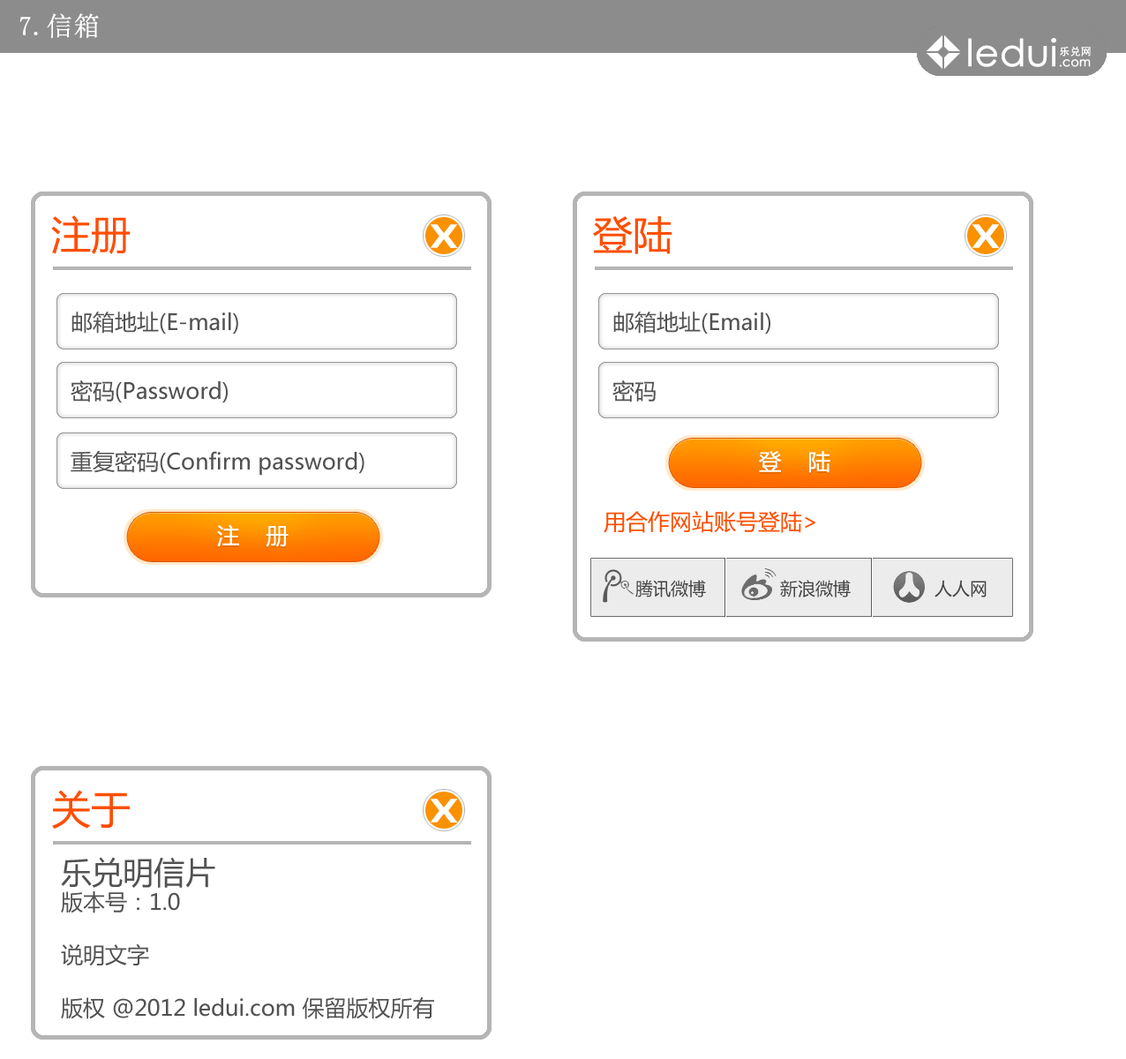
<style>
.page{position:relative;width:1126px;height:1059px;background:#ffffff}
.page>*{position:absolute;margin:0}
.t1{font:26.5px "SimSun";color:#ffffff;font-weight:bold}
.t2{font:39.7px "MicrosoftYaHei";color:#ff4e00}
.t3{font:35.3px "ç»å¸ç»¼èºä½ç®-regular";color:#ffffff}
.t4{font:22.1px "MicrosoftYaHei";color:#525252}
.t5{font:22.4px "MicrosoftYaHei";color:#ffffff}
.t6{font:22.1px "MicrosoftYaHei";color:#ff4e00}
.t7{font:17.6px "MicrosoftYaHei";color:#444444}
.t8{font:30.9px "MicrosoftYaHei";color:#525252}
</style>
<div class="page">
<p class="t1" style="left:19px;top:13px;width:80px;height:26px">7.信箱</p>
<p class="t2" style="left:51px;top:215px;width:80px;height:39px">注册</p>
<p class="t2" style="left:593px;top:216px;width:79px;height:38px">登陆</p>
<p class="t3" style="left:430px;top:224px;width:28px;height:24px">X</p>
<p class="t3" style="left:972px;top:224px;width:28px;height:24px">X</p>
<p class="t4" style="left:71px;top:312px;width:167px;height:22px">邮箱地址(E-mail)</p>
<p class="t4" style="left:613px;top:312px;width:157px;height:22px">邮箱地址(Email)</p>
<p class="t4" style="left:71px;top:380px;width:157px;height:23px">密码(Password)</p>
<p class="t4" style="left:612px;top:380px;width:44px;height:22px">密码</p>
<p class="t4" style="left:71px;top:451px;width:293px;height:25px">重复密码(Confirm password)</p>
<p class="t5" style="left:759px;top:451px;width:71px;height:22px">登    陆</p>
<p class="t6" style="left:604px;top:511px;width:211px;height:22px">用合作网站账号登陆&gt;</p>
<p class="t5" style="left:217px;top:524px;width:72px;height:23px">注    册</p>
<p class="t7" style="left:635px;top:580px;width:71px;height:17px">腾讯微博</p>
<p class="t7" style="left:780px;top:580px;width:71px;height:17px">新浪微博</p>
<p class="t7" style="left:935px;top:580px;width:52px;height:17px">人人网</p>
<p class="t2" style="left:52px;top:790px;width:78px;height:39px">关于</p>
<p class="t3" style="left:430px;top:799px;width:28px;height:23px">X</p>
<p class="t4" style="left:61px;top:857px;width:373px;height:162px"><span class="t8">乐兑明信片<br></span>版本号：1.0<br><br>说明文字<br><br>版权 @2012 ledui.com 保留版权所有</p>
</div>
